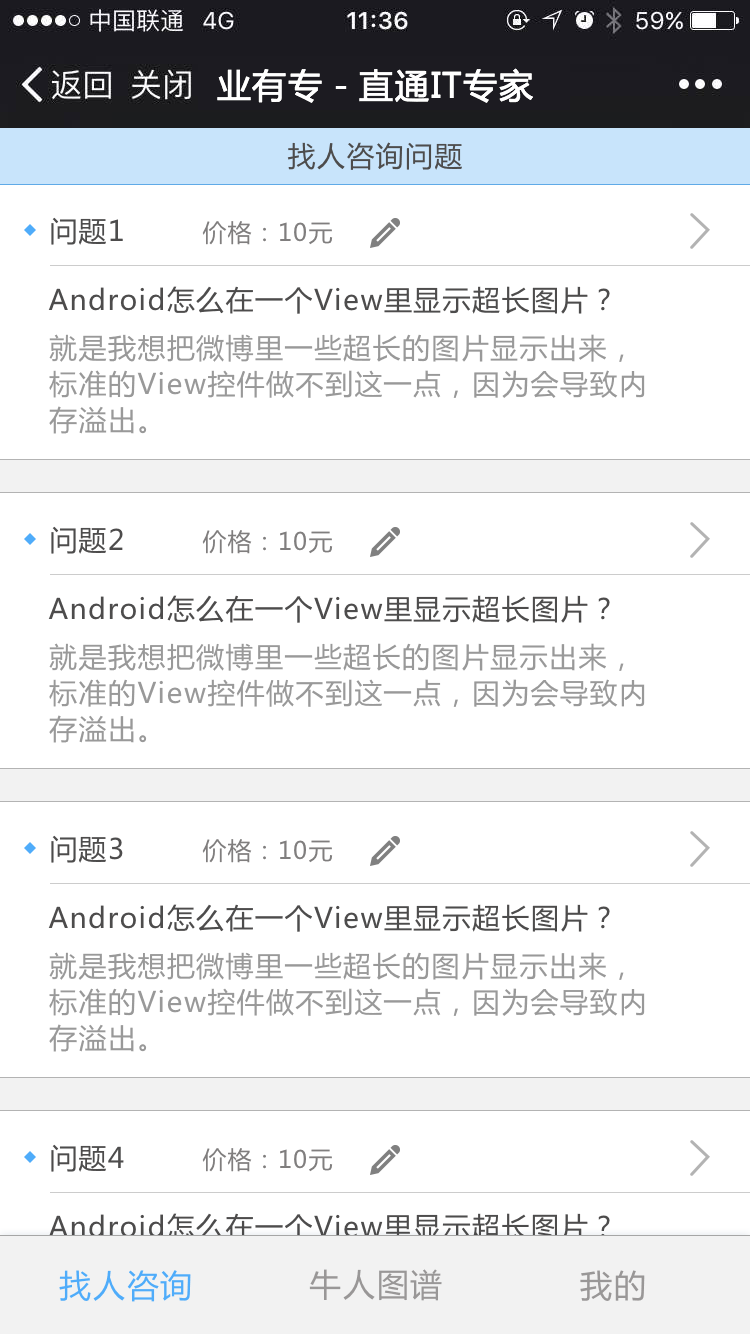
<style>
.page{position:relative;width:750px;height:1334px;background:#ffffff}
.page>*{position:absolute;margin:0}
.t1{font:34px "MicrosoftYaHei";letter-spacing:0.05em;color:#ffffff;text-transform:uppercase}
.t2{font:28px "MicrosoftYaHei";letter-spacing:0.05em;color:#4d4c4c}
.t3{font:24px "MicrosoftYaHei";letter-spacing:0.05em;color:#807e7e}
.t4{font:28px/36px "MicrosoftYaHei";letter-spacing:0.05em;color:#999999}
.t5{font:32px "MicrosoftYaHei";letter-spacing:0.05em;color:#4facfa;text-transform:uppercase}
.t6{font:32px "MicrosoftYaHei";letter-spacing:0.05em;color:#999797;text-transform:uppercase}
</style>
<div class="page">
<p class="t1" style="left:217px;top:68px;width:316px;height:35px">业有专－直通IT专家</p>
<p class="t2" style="left:287px;top:142px;width:175px;height:28px">找人咨询问题</p>
<p class="t2" style="left:51px;top:217px;width:72px;height:28px">问题1</p>
<p class="t3" style="left:202px;top:221px;width:131px;height:24px">价格：10元</p>
<p class="t2" style="left:48px;top:286px;width:562px;height:28px">Android怎么在一个View里显示超长图片？</p>
<p class="t4" style="left:49px;top:334px;width:596px;height:100px">就是我想把微博里一些超长的图片显示出来，标准的View控件做不到这一点，因为会导致内<br>存溢出。</p>
<p class="t2" style="left:51px;top:526px;width:72px;height:28px">问题2</p>
<p class="t3" style="left:202px;top:530px;width:131px;height:24px">价格：10元</p>
<p class="t2" style="left:48px;top:595px;width:562px;height:28px">Android怎么在一个View里显示超长图片？</p>
<p class="t4" style="left:49px;top:643px;width:596px;height:100px">就是我想把微博里一些超长的图片显示出来，标准的View控件做不到这一点，因为会导致内<br>存溢出。</p>
<p class="t2" style="left:51px;top:835px;width:72px;height:28px">问题3</p>
<p class="t3" style="left:202px;top:839px;width:131px;height:24px">价格：10元</p>
<p class="t2" style="left:48px;top:904px;width:562px;height:28px">Android怎么在一个View里显示超长图片？</p>
<p class="t4" style="left:49px;top:952px;width:596px;height:100px">就是我想把微博里一些超长的图片显示出来，标准的View控件做不到这一点，因为会导致内<br>存溢出。</p>
<p class="t2" style="left:51px;top:1144px;width:73px;height:28px">问题4</p>
<p class="t3" style="left:202px;top:1148px;width:131px;height:24px">价格：10元</p>
<p class="t2" style="left:48px;top:1213px;width:562px;height:28px">Android怎么在一个View里显示超长图片？</p>
<p class="t5" style="left:59px;top:1270px;width:132px;height:32px">找人咨询</p>
<p class="t6" style="left:309px;top:1269px;width:133px;height:32px">牛人图谱</p>
<p class="t6" style="left:580px;top:1270px;width:65px;height:31px">我的</p>
</div>
